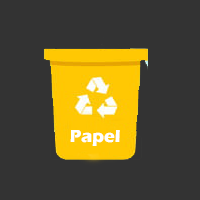
<style>
.page{position:relative;width:200px;height:200px;background:#333333}
.page>*{position:absolute;margin:0}
.t1{font:18px "ErasITC-Bold";color:#feffff}
</style>
<div class="page">
<p class="t1" style="left:70px;top:130px;width:50px;height:16px">Papel</p>
</div>
